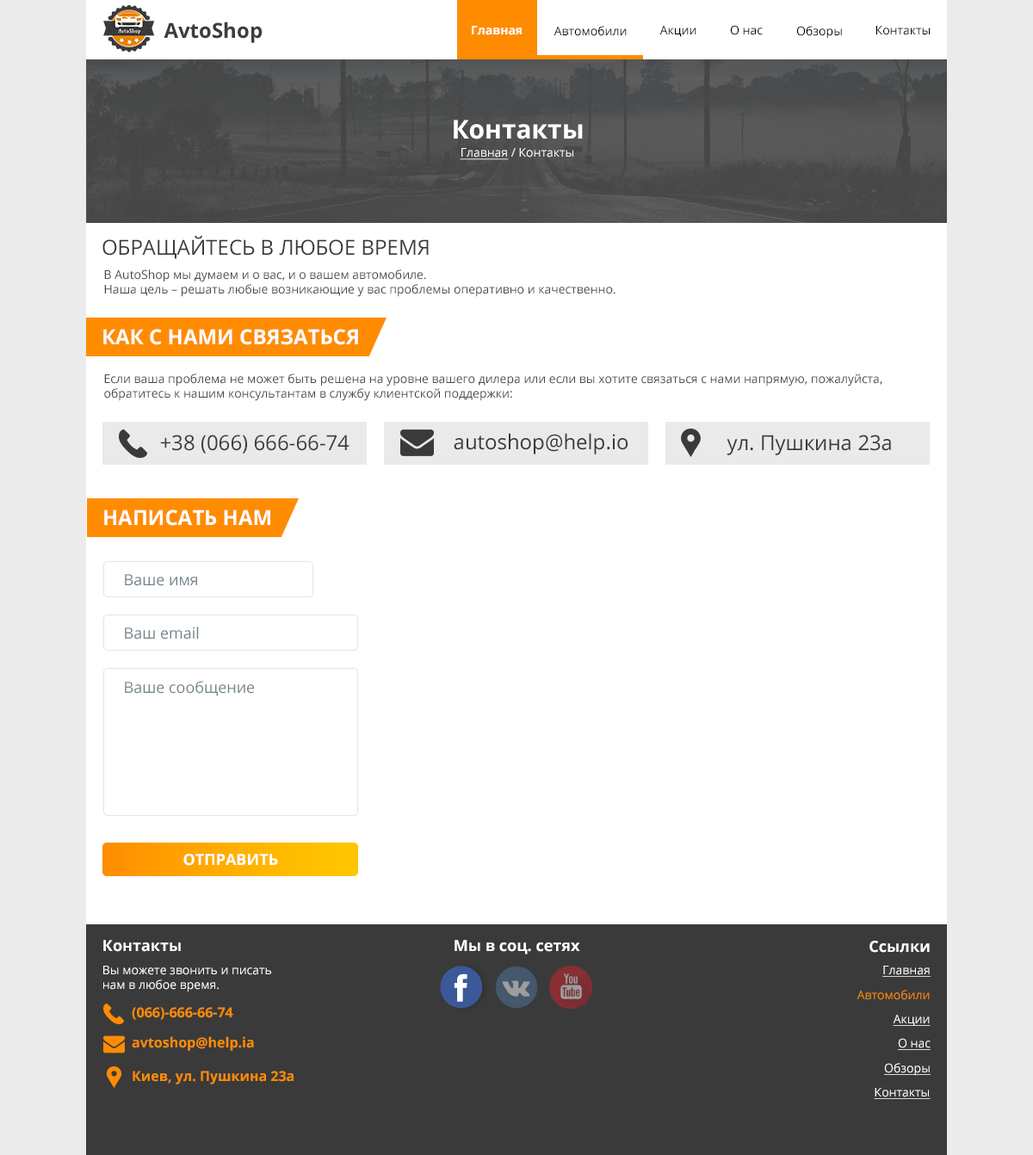
<style>
.page{position:relative;width:1033px;height:1155px;background:#ffffff}
.page>*{position:absolute;margin:0}
.t1{font:20.7px "OpenSans-Bold";color:#3c3c3c}
.t2{font:12px "OpenSans-Bold";color:#ffffff}
.t3{font:12px "OpenSans"}
.t4{font:12px "OpenSans";color:#000000}
.t5{font:25.8px "OpenSans-Bold";color:#ffffff}
.t6{font:12px "OpenSans";color:#ffffff}
.t7{font:12px "OpenSans";color:#ffffff;text-decoration:underline}
.t8{font:20.7px "OpenSans";color:#3a3a3a;text-transform:uppercase}
.t9{font:12px "OpenSans";color:#474747}
.t10{font:20.7px "OpenSans-Bold";color:#ffffff;text-transform:uppercase}
.t11{font:20.7px "OpenSans";color:#3a3a3a}
.t12{font:15.5px "OpenSans";color:#72848c}
.t13{font:15.5px "OpenSans-Bold";color:#ffffff;text-transform:uppercase}
.t14{font:15.5px "OpenSans-Bold";color:#ffffff}
.t15{font:12px "OpenSans";color:#ff8c00}
.t16{font:13.8px "OpenSans-Bold";color:#ff8c00}
</style>
<div class="page">
<p class="t1" style="left:163px;top:22px;width:99px;height:21px">AvtoShop</p>
<p class="t2" style="left:472px;top:26px;width:49px;height:9px">Главная</p>
<p class="t3" style="left:473px;top:26px;width:47px;height:9px">Главная</p>
<p class="t4" style="left:553px;top:26px;width:73px;height:10px">Автомобили</p>
<p class="t4" style="left:659px;top:26px;width:37px;height:11px">Акции</p>
<p class="t4" style="left:730px;top:25px;width:32px;height:10px">О нас</p>
<p class="t4" style="left:796px;top:26px;width:46px;height:13px">Обзоры</p>
<p class="t4" style="left:875px;top:26px;width:54px;height:9px">Контакты</p>
<p class="t5" style="left:453px;top:120px;width:130px;height:19px">Контакты</p>
<p class="t6" style="left:460px;top:148px;width:113px;height:12px"><span class="t7">Главная </span>/ Контакты</p>
<p class="t8" style="left:102px;top:236px;width:327px;height:23px">Обращайтесь в любое время</p>
<p class="t9" style="left:104px;top:269px;width:511px;height:28px">В AutoShop мы думаем и о вас, и о вашем автомобиле.<br>Наша цель – решать любые возникающие у вас проблемы оперативно и качественно.</p>
<p class="t10" style="left:103px;top:329px;width:255px;height:16px">Как с нами связаться</p>
<p class="t9" style="left:104px;top:373px;width:778px;height:28px">Если ваша проблема не может быть решена на уровне вашего дилера или если вы хотите связаться с нами напрямую, пожалуйста, <br>обратитесь к нашим консультантам в службу клиентской поддержки:</p>
<p class="t8" style="left:160px;top:435px;width:189px;height:18px">+38 (066) 666-66-74</p>
<p class="t11" style="left:453px;top:433px;width:175px;height:21px">autoshop@help.io</p>
<p class="t11" style="left:726px;top:435px;width:165px;height:20px">ул. Пушкина 23а</p>
<p class="t10" style="left:104px;top:509px;width:166px;height:17px">Написать нам</p>
<p class="t12" style="left:125px;top:574px;width:72px;height:12px">Ваше имя</p>
<p class="t12" style="left:125px;top:626px;width:74px;height:13px">Ваш email</p>
<p class="t12" style="left:125px;top:681px;width:129px;height:15px">Ваше сообщение</p>
<p class="t13" style="left:183px;top:854px;width:95px;height:12px">отправить</p>
<p class="t14" style="left:103px;top:940px;width:78px;height:12px">Контакты</p>
<p class="t14" style="left:454px;top:940px;width:126px;height:14px">Мы в соц. сетях</p>
<p class="t14" style="left:869px;top:941px;width:60px;height:12px">Ссылки</p>
<p class="t6" style="left:103px;top:965px;width:168px;height:27px">Вы можете звонить и писать <br>нам в любое время.</p>
<p class="t7" style="left:882px;top:965px;width:48px;height:12px">Главная</p>
<p class="t15" style="left:856px;top:990px;width:73px;height:10px">Автомобили</p>
<p class="t16" style="left:132px;top:1007px;width:101px;height:13px">(066)-666-66-74</p>
<p class="t7" style="left:892px;top:1015px;width:38px;height:11px">Акции</p>
<p class="t16" style="left:132px;top:1036px;width:122px;height:15px">avtoshop@help.ia</p>
<p class="t7" style="left:897px;top:1038px;width:33px;height:12px">О нас</p>
<p class="t16" style="left:133px;top:1070px;width:160px;height:14px">Киев, ул. Пушкина 23а</p>
<p class="t7" style="left:884px;top:1063px;width:46px;height:13px">Обзоры</p>
<p class="t7" style="left:873px;top:1088px;width:57px;height:11px">Контакты</p>
</div>
